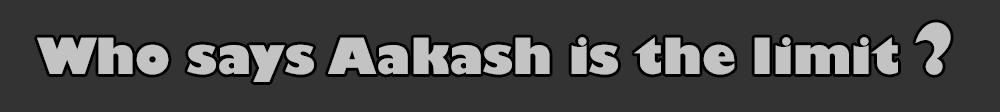
<style>
.page{position:relative;width:1000px;height:112px;background:#333333}
.page>*{position:absolute;margin:0}
.t1{font:48.8px "GillSans-UltraBold";color:#c3c3c3}
.t2{font:68.4px "GillSans-UltraBold";color:#c3c3c3}
</style>
<div class="page">
<p class="t1" style="left:37px;top:22px;width:914px;height:60px">Who says Aakash is the limit <span class="t2">?</span></p>
</div>
